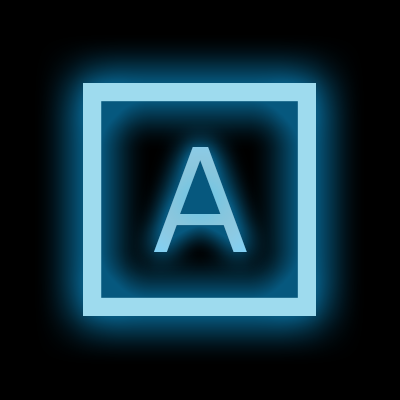
<style>
.page{position:relative;width:400px;height:400px;background:#000000}
.page>*{position:absolute;margin:0}
.t1{font:150px "Purista";color:#80d1f5}
</style>
<div class="page">
<p class="t1" style="left:154px;top:147px;width:93px;height:105px">A</p>
</div>
